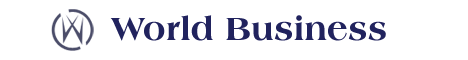
<style>
.page{position:relative;width:468px;height:60px;background:#ffffff}
.page>*{position:absolute;margin:0}
.t1{font:34px "AmericanaBT-ExtraBold";letter-spacing:0.01em;color:#21235e}
</style>
<div class="page">
<p class="t1" style="left:110px;top:15px;width:276px;height:26px">World Business</p>
</div>
